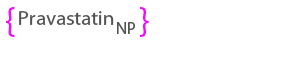
<style>
.page{position:relative;width:300px;height:60px;background:#ffffff}
.page>*{position:absolute;margin:0}
.t1{font:37.5px "MyriadPro-Regular";color:#f30df6}
.t2{font:20.8px "MyriadPro-Regular";color:#525252}
.t3{font:16.7px "MyriadPro-Regular";color:#525252}
</style>
<div class="page">
<p class="t1" style="left:6px;top:7px;width:9px;height:30px">{</p>
<p class="t2" style="left:19px;top:11px;width:95px;height:14px">Pravastatin</p>
<p class="t1" style="left:140px;top:7px;width:9px;height:30px">}</p>
<p class="t3" style="left:117px;top:22px;width:18px;height:12px">NP</p>
</div>
